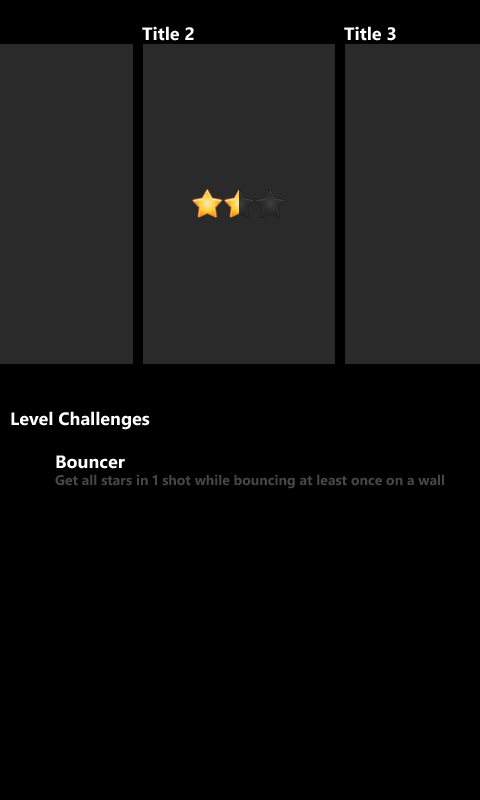
<style>
.page{position:relative;width:480px;height:800px;background:#000000}
.page>*{position:absolute;margin:0}
.t1{font:18px "SegoeWP-Bold";color:#ffffff}
.t2{font:14px "SegoeWP-Bold";color:#474747}
</style>
<div class="page">
<p class="t1" style="left:142px;top:26px;width:52px;height:15px">Title 2</p>
<p class="t1" style="left:344px;top:26px;width:52px;height:15px">Title 3</p>
<p class="t1" style="left:11px;top:411px;width:139px;height:19px">Level Challenges</p>
<p class="t1" style="left:56px;top:455px;width:69px;height:14px">Bouncer</p>
<p class="t2" style="left:55px;top:474px;width:389px;height:15px">Get all stars in 1 shot while bouncing at least once on a wall</p>
</div>
